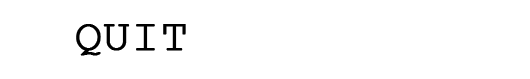
<style>
.page{position:relative;width:530px;height:79px;background:#ffffff}
.page>*{position:absolute;margin:0}
.t1{font:45.8px "CourierNewPSMT";color:#000000;font-weight:bold}
</style>
<div class="page">
<p class="t1" style="left:76px;top:24px;width:110px;height:32px">QUIT</p>
</div>
